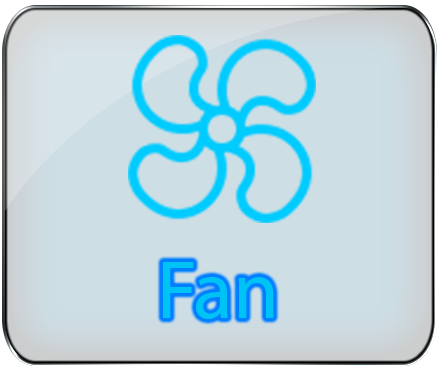
<style>
.page{position:relative;width:440px;height:369px;background:#cddee5}
.page>*{position:absolute;margin:0}
.t1{font:83.2px "MyriadPro-Regular";color:#00c3f5}
</style>
<div class="page">
<p class="t1" style="left:163px;top:262px;width:111px;height:57px">Fan</p>
</div>
